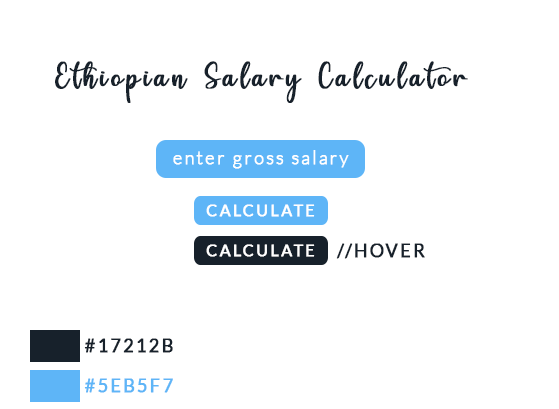
<style>
.page{position:relative;width:559px;height:409px;background:#ffffff}
.page>*{position:absolute;margin:0}
.t1{font:33px "HelloRegular";letter-spacing:0.1em;color:#17212b;font-weight:bold;scale:0.95 1}
.t2{font:19px "Lato-Light";letter-spacing:0.1em;color:#ffffff;font-weight:bold;scale:0.95 1}
.t3{font:17.1px "Lato-Regular";letter-spacing:0.1em;color:#ffffff;text-transform:uppercase;font-weight:bold;scale:0.96 1}
.t4{font:19px "Lato-Regular";letter-spacing:0.1em;color:#17212b;text-transform:uppercase;font-weight:bold;scale:0.95 1}
.t5{font:19px "Lato-Regular";letter-spacing:0.1em;color:#5eb5f7;text-transform:uppercase;font-weight:bold;scale:0.95 1}
</style>
<div class="page">
<p class="t1" style="left:55px;top:61px;width:413px;height:42px">Ethiopian Salary Calculator</p>
<p class="t2" style="left:173px;top:150px;width:176px;height:19px">enter gross salary</p>
<p class="t3" style="left:206px;top:204px;width:109px;height:13px">Calculate</p>
<p class="t3" style="left:206px;top:244px;width:109px;height:13px">Calculate</p>
<p class="t4" style="left:336px;top:243px;width:89px;height:16px">//hover</p>
<p class="t4" style="left:84px;top:338px;width:89px;height:15px">#17212b</p>
<p class="t5" style="left:84px;top:378px;width:89px;height:15px">#5eb5f7</p>
</div>
